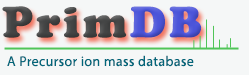
<style>
.page{position:relative;width:249px;height:75px;background:#f5f7f7}
.page>*{position:absolute;margin:0}
.t1{font:43px "CooperBlackStd";letter-spacing:0.075em}
.t2{font:14px "MyriadPro-Regular";letter-spacing:0.025em;color:#01667a}
</style>
<div class="page">
<p class="t1" style="left:2px;top:6px;width:200px;height:32px">PrimDB</p>
<p class="t2" style="left:7px;top:55px;width:187px;height:12px">A Precursor ion mass database</p>
</div>
